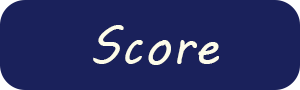
<style>
.page{position:relative;width:300px;height:90px;background:#1a215b}
.page>*{position:absolute;margin:0}
.t1{font:50px "MVBoli";letter-spacing:0.03em;color:#fdfce9}
</style>
<div class="page">
<p class="t1" style="left:93px;top:25px;width:126px;height:40px">Score</p>
</div>
